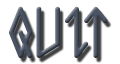
<style>
.page{position:relative;width:120px;height:64px;background:#ffffff}
.page>*{position:absolute;margin:0}
.t1{font:64px "ComicRunes";color:#4a5363}
</style>
<div class="page">
<p class="t1" style="left:8px;top:6px;width:100px;height:52px">QUIT</p>
</div>
